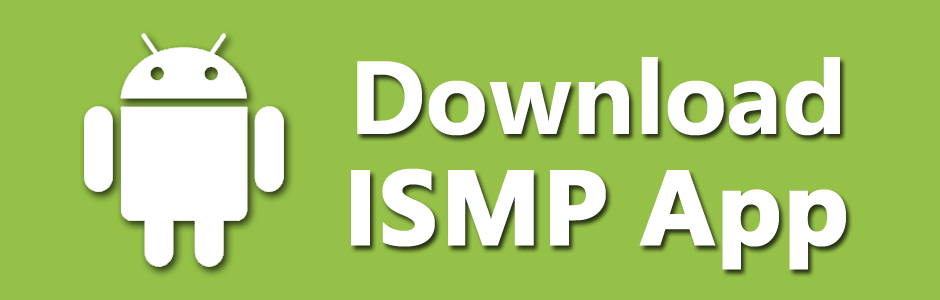
<style>
.page{position:relative;width:940px;height:300px;background:#95c148}
.page>*{position:absolute;margin:0}
.t1{font:178.2px/110px "SegoeUI-Bold";color:#ffffff}
.t2{font:178.2px/110px "SegoeUI-Bold";color:#ffffff;font-weight:bold}
</style>
<div class="page">
<p class="t1" style="left:351px;top:57px;width:495px;height:213px;text-align:center">Download <br><span class="t2">ISMP App</span></p>
</div>
